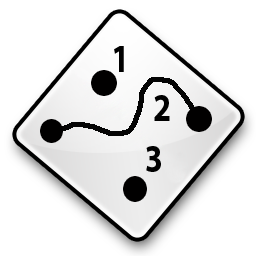
<style>
.page{position:relative;width:256px;height:256px;background:#ffffff}
.page>*{position:absolute;margin:0}
.t1{font:39.6px "MyriadPro-Bold";letter-spacing:0.005em;color:#010101;scale:0.82 1}
</style>
<div class="page">
<p class="t1" style="left:114px;top:46px;width:10px;height:26px">1</p>
<p class="t1" style="left:154px;top:95px;width:16px;height:26px">2</p>
<p class="t1" style="left:146px;top:146px;width:15px;height:26px">3</p>
</div>
